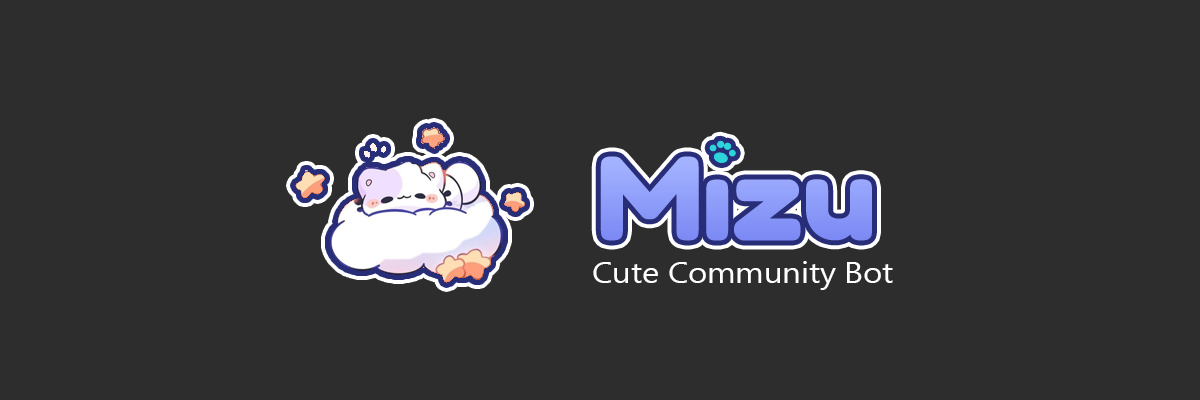
<style>
.page{position:relative;width:1200px;height:400px;background:#2d2d2d}
.page>*{position:absolute;margin:0}
.t1{font:120px "Fredoka_700.000wght_105.000wdth";color:#8f9bf7}
.t2{font:29.5px "SegoeUI";color:#ffffff;scale:1.11 1}
</style>
<div class="page">
<p class="t1" style="left:600px;top:156px;width:272px;height:85px">Mızu</p>
<p class="t2" style="left:593px;top:261px;width:300px;height:29px">Cute Community Bot</p>
</div>
